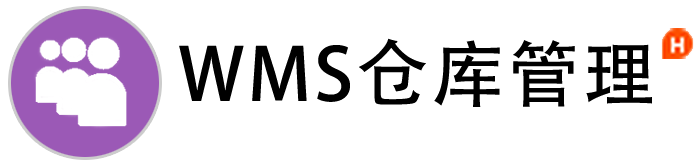
<style>
.page{position:relative;width:700px;height:165px;background:#ffffff}
.page>*{position:absolute;margin:0}
.t1{font:72px "AdobeHeitiStd-Regular";letter-spacing:0.05em;color:#000000}
</style>
<div class="page">
<p class="t1" style="left:179px;top:38px;width:473px;height:69px">WMS仓库管理</p>
</div>
